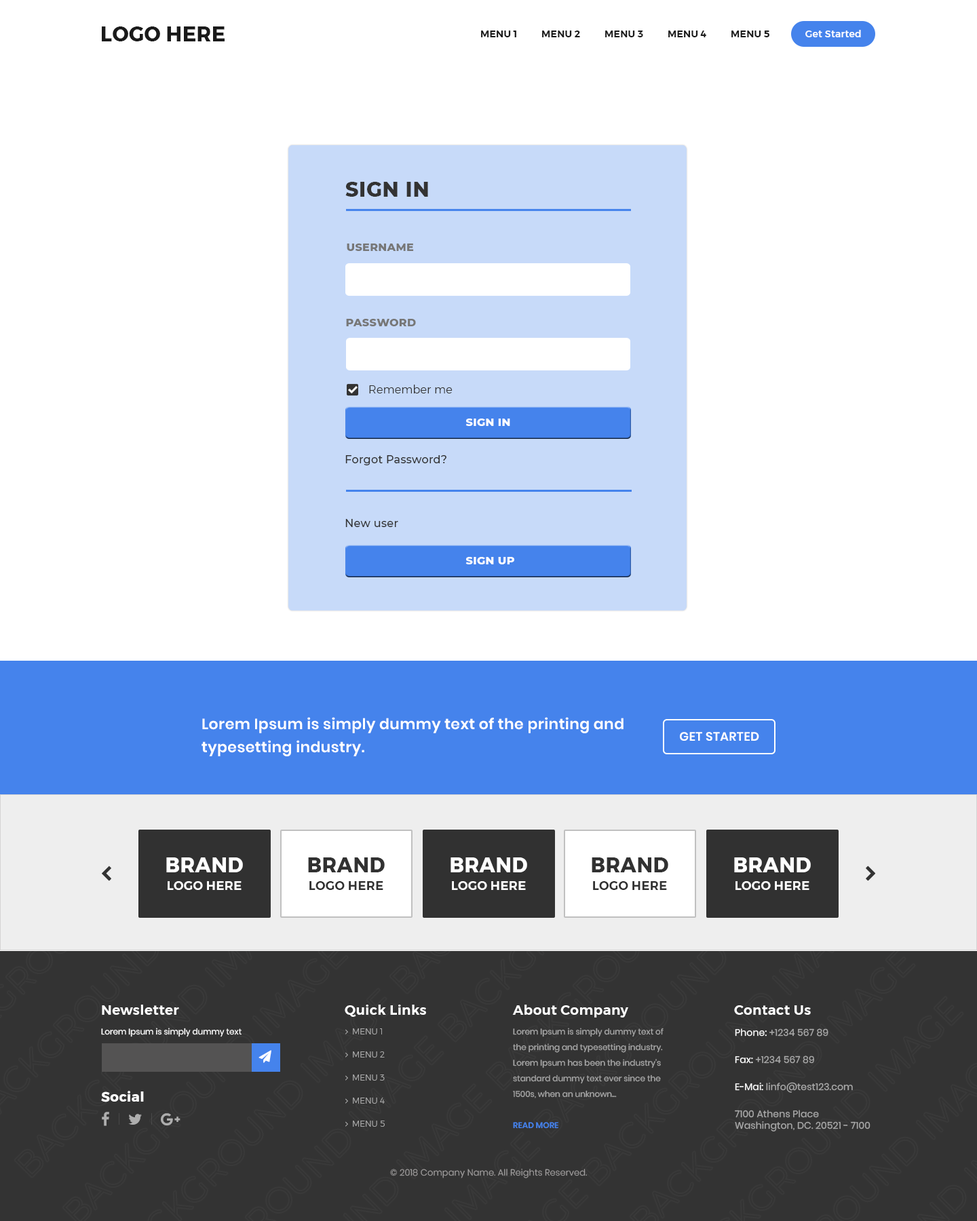
<style>
.page{position:relative;width:977px;height:1221px;background:#ffffff}
.page>*{position:absolute;margin:0}
.t1{font:20.3px "Montserrat-Bold";letter-spacing:0.02em;color:#1a1a1a;text-transform:uppercase}
.t2{font:9.5px "Montserrat-Medium";letter-spacing:0.02em;color:#ffffff}
.t3{font:9.5px "Montserrat-SemiBold";letter-spacing:0.02em;color:#1a1a1a;text-transform:uppercase}
.t4{font:20.3px "Montserrat-ExtraBold";letter-spacing:0.02em;color:#333333;text-transform:uppercase}
.t5{font:10.9px "Montserrat-ExtraBold";letter-spacing:0.02em;color:#777777;text-transform:uppercase}
.t6{font:10.9px "Montserrat-Light";letter-spacing:0.02em;color:#333333}
.t7{font:10.9px "Montserrat-ExtraBold";letter-spacing:0.02em;color:#ffffff;text-transform:uppercase}
.t8{font:10.9px "Montserrat-Medium";letter-spacing:0.02em;color:#333333}
.t9{font:14.9px/23.1px "Poppins-SemiBold";letter-spacing:0.02em;color:#ffffff}
.t10{font:12.2px "Poppins-SemiBold";letter-spacing:0.02em;color:#ffffff;text-transform:uppercase}
.t11{font:12.2px/17.6px "Montserrat-SemiBold";letter-spacing:0.02em;color:#ffffff;text-transform:uppercase}
.t12{font:20.3px/17.6px "Montserrat-Bold";letter-spacing:0.02em;color:#ffffff;text-transform:uppercase}
.t13{font:12.2px/17.6px "Montserrat-SemiBold";letter-spacing:0.02em;color:#313131;text-transform:uppercase}
.t14{font:20.3px/17.6px "Montserrat-Bold";letter-spacing:0.02em;color:#313131;text-transform:uppercase}
.t15{font:12.2px/17.6px "Montserrat-SemiBold";letter-spacing:0.02em;color:#fefefe;text-transform:uppercase}
.t16{font:20.3px/17.6px "Montserrat-Bold";letter-spacing:0.02em;color:#fefefe;text-transform:uppercase}
.t17{font:13.6px "Montserrat-SemiBold";letter-spacing:0.02em;color:#ffffff}
.t18{font:8.1px "Poppins-Regular";color:#ffffff}
.t19{font:8.1px/15.6px "Poppins-Regular";color:#aaaaaa}
.t20{font:8.1px/15.6px "Poppins-SemiBold";color:#4583ec;text-transform:uppercase}
.t21{font:9.5px/27.1px "Poppins-Regular";letter-spacing:0.01em;color:#aaaaaa}
.t22{font:9.5px "Poppins-Regular";letter-spacing:0.01em;color:#ffffff}
.t23{font:9.5px "Poppins-Regular";letter-spacing:0.01em;color:#aaaaaa}
.t24{font:9.5px/27.1px "Poppins-Regular";letter-spacing:0.01em;color:#ffffff}
.t25{font:13.6px "Montserrat-Bold";letter-spacing:0.02em;color:#ffffff}
.t26{font:8.8px "Poppins-Light";letter-spacing:0.01em;color:#a3a1a1}
</style>
<div class="page">
<p class="t1" style="left:102px;top:26px;width:123px;height:15px">Logo here</p>
<p class="t2" style="left:805px;top:30px;width:56px;height:7px">Get Started</p>
<p class="t3" style="left:481px;top:31px;width:288px;height:6px">Menu 1          Menu 2          Menu 3          Menu 4          Menu 5</p>
<p class="t4" style="left:345px;top:182px;width:83px;height:15px">sign in</p>
<p class="t5" style="left:347px;top:243px;width:67px;height:8px">username</p>
<p class="t5" style="left:346px;top:319px;width:70px;height:7px">PASSWORD</p>
<p class="t6" style="left:369px;top:385px;width:83px;height:8px">Remember me</p>
<p class="t7" style="left:465px;top:418px;width:45px;height:8px">SIGN IN</p>
<p class="t8" style="left:345px;top:455px;width:101px;height:10px">Forgot Password?</p>
<p class="t8" style="left:345px;top:519px;width:53px;height:8px">New user</p>
<p class="t7" style="left:465px;top:557px;width:49px;height:7px">SIGN up</p>
<p class="t9" style="left:201px;top:717px;width:422px;height:39px">Lorem Ipsum is simply dummy text of the printing and<br>typesetting industry.</p>
<p class="t10" style="left:680px;top:732px;width:79px;height:9px">Get Started</p>
<p class="t11" style="left:166px;top:857px;width:77px;height:33px;text-align:center"><span class="t12">Brand<br></span>Logo Here</p>
<p class="t13" style="left:308px;top:857px;width:77px;height:33px;text-align:center"><span class="t14">Brand<br></span>Logo Here</p>
<p class="t11" style="left:450px;top:857px;width:77px;height:33px;text-align:center"><span class="t12">Brand<br></span>Logo Here</p>
<p class="t13" style="left:591px;top:857px;width:77px;height:33px;text-align:center"><span class="t14">Brand<br></span>Logo Here</p>
<p class="t15" style="left:734px;top:857px;width:77px;height:33px;text-align:center"><span class="t16">Brand<br></span>Logo Here</p>
<p class="t17" style="left:102px;top:1005px;width:77px;height:10px">Newsletter</p>
<p class="t17" style="left:345px;top:1005px;width:81px;height:12px">Quick Links</p>
<p class="t17" style="left:512px;top:1005px;width:116px;height:12px">About Company</p>
<p class="t17" style="left:734px;top:1005px;width:77px;height:10px">Contact Us</p>
<p class="t18" style="left:101px;top:1028px;width:140px;height:9px">Lorem Ipsum is simply dummy text</p>
<p class="t19" style="left:513px;top:1028px;width:150px;height:101px">Lorem Ipsum is simply dummy text of the printing and typesetting industry. Lorem Ipsum has been the industry's standard dummy text ever since the 1500s, when an unknown...<br><br><span class="t20">Read More</span></p>
<p class="t21" style="left:735px;top:1028px;width:135px;height:103px"><span class="t22">Phone:</span><span class="t23"> +1234 567 89<br></span><span class="t24">Fax:</span> +1234 567 89<br><span class="t24">E-Mai:</span> linfo@test123.com<br>7100 Athens Place<br><span class="t23">Washington, DC. 20521 - 7100</span></p>
<p class="t25" style="left:101px;top:1091px;width:43px;height:11px">Social</p>
<p class="t26" style="left:390px;top:1169px;width:197px;height:9px">© 2018 Company Name. All Reights Reserved.</p>
</div>
